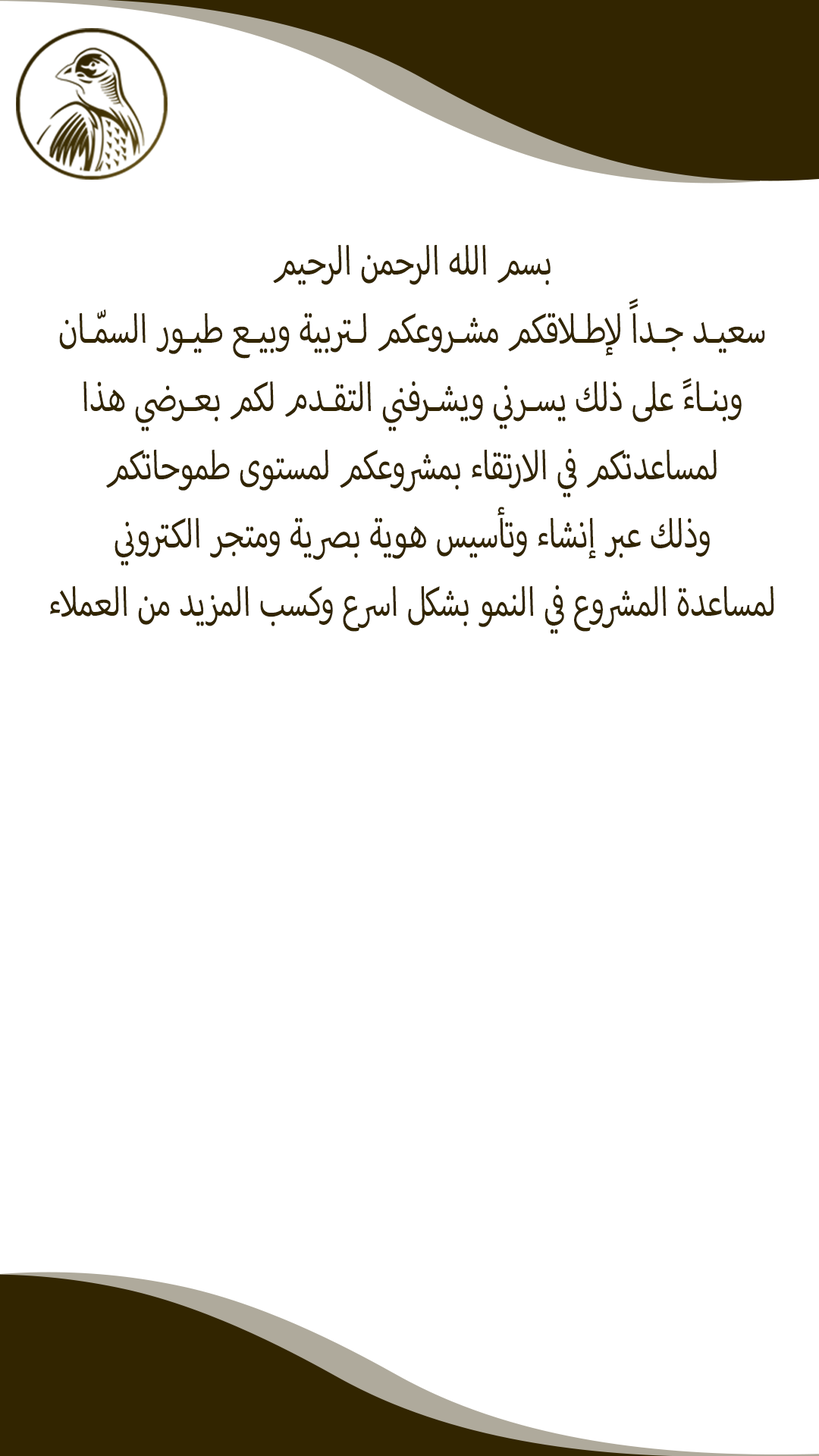
<style>
.page{position:relative;width:819px;height:1456px;background:#ffffff}
.page>*{position:absolute;margin:0}
.t1{font:56.9px "MyriadArabic-Regular";color:#322500;scale:0.75 1}
</style>
<div class="page">
<p class="t1" style="left:50px;top:245px;width:724px;height:389px;text-align:center">بسم الله الرحمن الرحيم<br>سعيـد جـداً لإطـلاقكم مشـروعكم لـتربية وبيـع طيـور السمّـان<br>وبنـاءً على ذلك يسـرني ويشـرفني التقـدم لكم بعـرضي هذا<br>لمساعدتكم في الارتقاء بمشروعكم لمستوى طموحاتكم<br>وذلك عبر إنشاء وتأسيس هوية بصرية ومتجر الكتروني<br>لمساعدة المشروع في النمو بشكل اسرع وكسب المزيد من العملاء</p>
</div>
